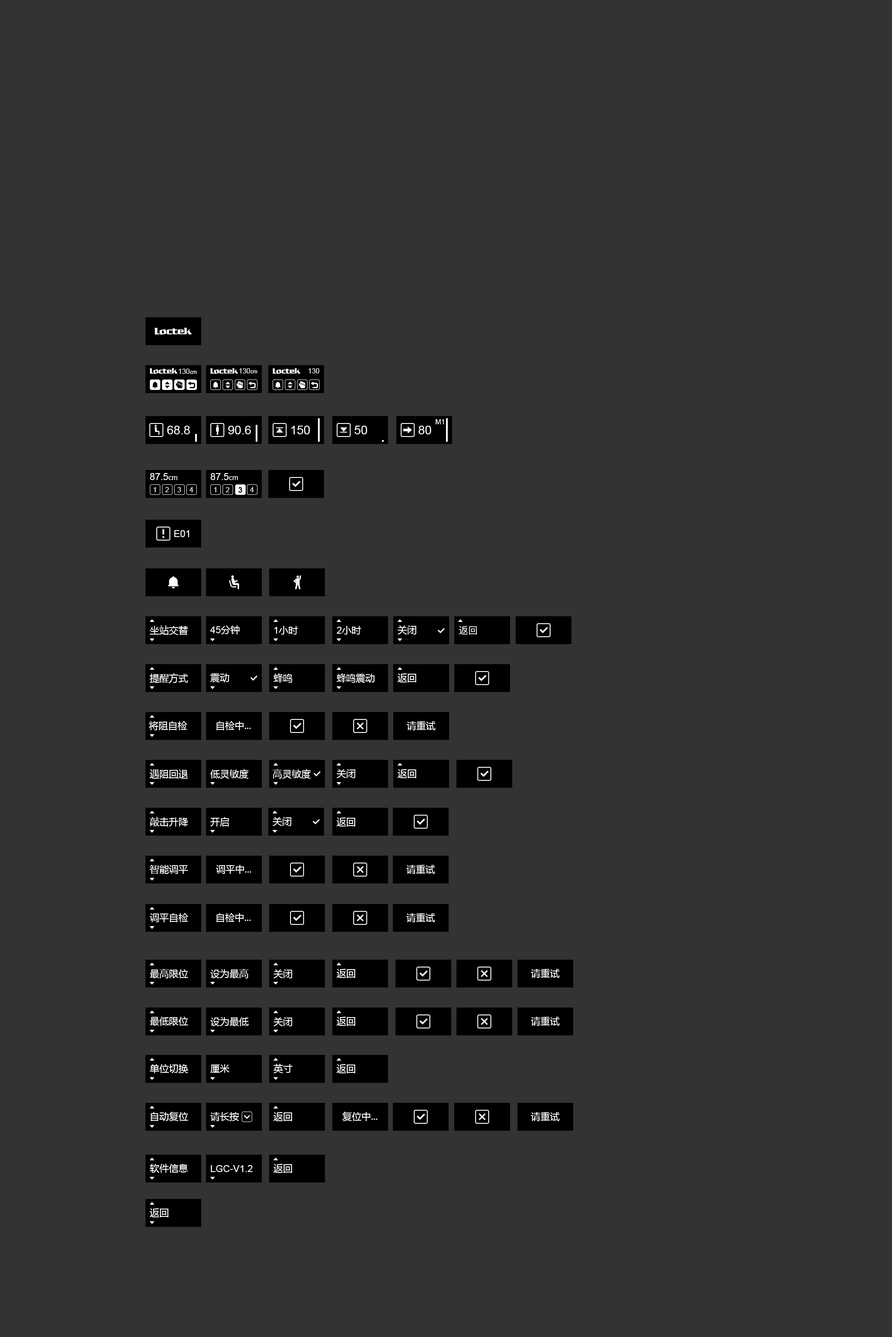
<style>
.page{position:relative;width:892px;height:1337px;background:#333333}
.page>*{position:absolute;margin:0}
.t1{font:7px "ArialMT";color:#ffffff}
.t2{font:5.2px "ArialMT";color:#ffffff}
.t3{font:12.2px "ArialMT";color:#ffffff}
.t4{font:9.6px "ArialMT";color:#ffffff}
.t5{font:7.8px "Arial-BoldMT";color:#000000}
.t6{font:9.6px "MicrosoftYaHei";color:#ffffff}
.t7{font:9.6px "PingFang-SC-Medium";color:#ffffff}
</style>
<div class="page">
<p class="t1" style="left:178px;top:369px;width:19px;height:5px">130<span class="t2">cm</span></p>
<p class="t1" style="left:239px;top:368px;width:18px;height:6px">130<span class="t2">cm</span></p>
<p class="t1" style="left:308px;top:368px;width:11px;height:6px">130</p>
<p class="t3" style="left:167px;top:426px;width:23px;height:8px">68.8</p>
<p class="t3" style="left:228px;top:426px;width:23px;height:8px">90.6</p>
<p class="t3" style="left:291px;top:426px;width:19px;height:8px">150</p>
<p class="t3" style="left:354px;top:426px;width:13px;height:8px">50</p>
<p class="t3" style="left:418px;top:426px;width:13px;height:8px">80</p>
<p class="t1" style="left:435px;top:419px;width:9px;height:5px">M1</p>
<p class="t4" style="left:150px;top:473px;width:27px;height:7px">87.5<span class="t1">cm</span></p>
<p class="t4" style="left:210px;top:473px;width:28px;height:7px">87.5<span class="t1">cm</span></p>
<p class="t1" style="left:153px;top:487px;width:3px;height:5px">1</p>
<p class="t1" style="left:165px;top:487px;width:4px;height:5px">2</p>
<p class="t1" style="left:178px;top:487px;width:3px;height:5px">3</p>
<p class="t1" style="left:189px;top:487px;width:4px;height:5px">4</p>
<p class="t1" style="left:214px;top:487px;width:2px;height:5px">1</p>
<p class="t1" style="left:226px;top:487px;width:3px;height:5px">2</p>
<p class="t5" style="left:238px;top:487px;width:4px;height:6px">3</p>
<p class="t1" style="left:250px;top:487px;width:4px;height:5px">4</p>
<p class="t4" style="left:174px;top:530px;width:15px;height:7px">E01</p>
<p class="t6" style="left:150px;top:626px;width:38px;height:9px">坐站交替</p>
<p class="t4" style="left:210px;top:626px;width:29px;height:9px">45<span class="t6">分钟</span></p>
<p class="t6" style="left:274px;top:626px;width:24px;height:9px"><span class="t4">1</span>小时</p>
<p class="t6" style="left:337px;top:626px;width:24px;height:9px"><span class="t4">2</span>小时</p>
<p class="t6" style="left:397px;top:626px;width:19px;height:9px">关闭</p>
<p class="t7" style="left:458px;top:626px;width:19px;height:9px">返回</p>
<p class="t6" style="left:150px;top:673px;width:38px;height:11px">提醒方式</p>
<p class="t6" style="left:210px;top:673px;width:19px;height:10px">震动</p>
<p class="t6" style="left:273px;top:673px;width:19px;height:10px">蜂鸣</p>
<p class="t6" style="left:337px;top:673px;width:37px;height:10px">蜂鸣震动</p>
<p class="t6" style="left:397px;top:673px;width:19px;height:10px">返回</p>
<p class="t6" style="left:148px;top:721px;width:39px;height:10px">将阻自检</p>
<p class="t6" style="left:216px;top:721px;width:35px;height:10px">自检中...</p>
<p class="t6" style="left:407px;top:721px;width:28px;height:10px">请重试</p>
<p class="t6" style="left:150px;top:769px;width:38px;height:10px">遇阻回退</p>
<p class="t6" style="left:210px;top:769px;width:39px;height:10px">低灵敏度</p>
<p class="t6" style="left:273px;top:769px;width:38px;height:10px">高灵敏度</p>
<p class="t6" style="left:337px;top:769px;width:18px;height:9px">关闭</p>
<p class="t6" style="left:397px;top:769px;width:19px;height:9px">返回</p>
<p class="t6" style="left:150px;top:817px;width:38px;height:10px">敲击升降</p>
<p class="t6" style="left:210px;top:817px;width:19px;height:10px">开启</p>
<p class="t6" style="left:273px;top:817px;width:18px;height:9px">关闭</p>
<p class="t6" style="left:337px;top:818px;width:18px;height:9px">返回</p>
<p class="t6" style="left:149px;top:865px;width:39px;height:9px">智能调平</p>
<p class="t6" style="left:216px;top:865px;width:35px;height:9px">调平中...</p>
<p class="t6" style="left:406px;top:865px;width:29px;height:9px">请重试</p>
<p class="t6" style="left:150px;top:913px;width:38px;height:10px">调平自检</p>
<p class="t6" style="left:216px;top:913px;width:35px;height:10px">自检中...</p>
<p class="t6" style="left:406px;top:913px;width:29px;height:10px">请重试</p>
<p class="t6" style="left:150px;top:969px;width:38px;height:10px">最高限位</p>
<p class="t6" style="left:210px;top:969px;width:39px;height:10px">设为最高</p>
<p class="t6" style="left:273px;top:970px;width:19px;height:9px">关闭</p>
<p class="t6" style="left:337px;top:969px;width:18px;height:9px">返回</p>
<p class="t6" style="left:531px;top:969px;width:28px;height:9px">请重试</p>
<p class="t6" style="left:150px;top:1017px;width:38px;height:9px">最低限位</p>
<p class="t6" style="left:210px;top:1017px;width:39px;height:10px">设为最低</p>
<p class="t6" style="left:273px;top:1017px;width:19px;height:10px">关闭</p>
<p class="t6" style="left:337px;top:1017px;width:18px;height:9px">返回</p>
<p class="t6" style="left:531px;top:1017px;width:28px;height:9px">请重试</p>
<p class="t6" style="left:150px;top:1064px;width:38px;height:10px">单位切换</p>
<p class="t6" style="left:210px;top:1064px;width:19px;height:10px">厘米</p>
<p class="t6" style="left:273px;top:1064px;width:20px;height:10px">英寸</p>
<p class="t6" style="left:337px;top:1064px;width:18px;height:10px">返回</p>
<p class="t6" style="left:151px;top:1112px;width:37px;height:9px">自动复位</p>
<p class="t6" style="left:210px;top:1112px;width:29px;height:9px">请长按</p>
<p class="t6" style="left:273px;top:1112px;width:19px;height:9px">返回</p>
<p class="t6" style="left:342px;top:1112px;width:35px;height:9px">复位中...</p>
<p class="t6" style="left:531px;top:1112px;width:28px;height:9px">请重试</p>
<p class="t6" style="left:150px;top:1164px;width:38px;height:9px">软件信息</p>
<p class="t4" style="left:211px;top:1165px;width:42px;height:7px">LGC-V1.2</p>
<p class="t6" style="left:273px;top:1164px;width:19px;height:9px">返回</p>
<p class="t6" style="left:150px;top:1209px;width:18px;height:9px">返回</p>
</div>
